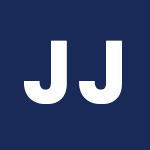
<style>
.page{position:relative;width:150px;height:150px;background:#1a2a58}
.page>*{position:absolute;margin:0}
.t1{font:150px "Poppins-Bold";letter-spacing:-0.086em;color:#ffffff;font-weight:bold}
</style>
<div class="page">
<p class="t1" style="left:24px;top:40px;width:98px;height:64px">J J</p>
</div>
